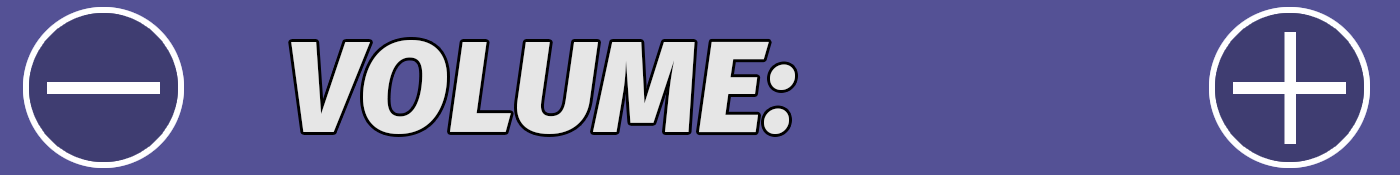
<style>
.page{position:relative;width:1400px;height:175px;background:#545195}
.page>*{position:absolute;margin:0}
.t1{font:131px "FiraSans-ExtraBoldItalic";color:#e6e6e6}
</style>
<div class="page">
<p class="t1" style="left:291px;top:39px;width:504px;height:95px">VOLUME:</p>
</div>
